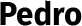
<style>
.page{position:relative;width:82px;height:26px;background:#ffffff}
.page>*{position:absolute;margin:0}
.t1{font:32.2px "FiraSans-Bold";color:#000000}
</style>
<div class="page">
<p class="t1" style="left:0px;top:0px;width:82px;height:26px">Pedro</p>
</div>
